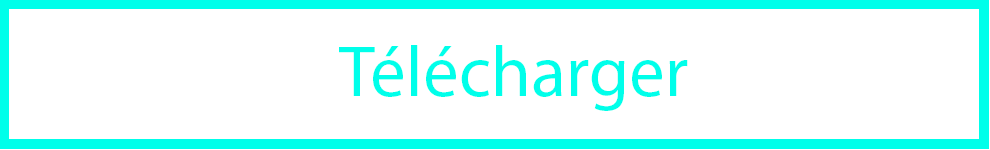
<style>
.page{position:relative;width:990px;height:150px;background:#ffffff}
.page>*{position:absolute;margin:0}
.t1{font:72px "MyriadPro-Regular";color:#00ffea}
</style>
<div class="page">
<p class="t1" style="left:339px;top:45px;width:349px;height:66px">Télécharger</p>
</div>
